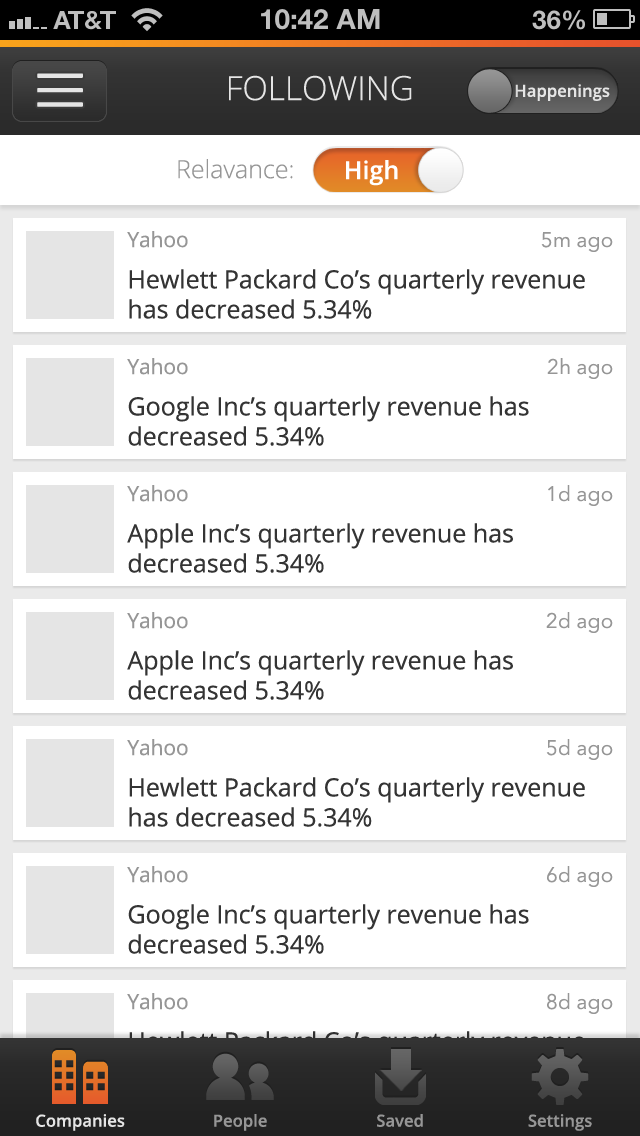
<style>
.page{position:relative;width:640px;height:1136px;background:#ffffff}
.page>*{position:absolute;margin:0}
.t1{font:33.3px "OpenSans-Light";color:#e5e5e5}
.t2{font:16.7px "OpenSans-Semibold";color:#e5e5e5}
.t3{font:25px "OpenSans-Light";color:#969696}
.t4{font:25px "OpenSans-Semibold";color:#ffffff}
.t5{font:25px "OpenSans";color:#343434}
.t6{font:20.8px "OpenSans";color:#969696}
.t7{font:20.8px "AvenirNext-Regular";color:#969696}
.t8{font:16.7px "OpenSans-Semibold";color:#969696}
</style>
<div class="page">
<p class="t1" style="left:229px;top:75px;width:183px;height:26px">FOLLOWING</p>
<p class="t2" style="left:515px;top:84px;width:95px;height:17px">Happenings</p>
<p class="t3" style="left:178px;top:159px;width:115px;height:20px">Relavance:</p>
<p class="t4" style="left:346px;top:160px;width:52px;height:26px">High</p>
<p class="t5" style="left:127px;top:231px;width:458px;height:88px"><span class="t6">Yahoo<br></span>Hewlett Packard Co’s quarterly revenue has decreased 5.34%</p>
<p class="t7" style="left:541px;top:232px;width:72px;height:20px">5m ago</p>
<p class="t5" style="left:127px;top:358px;width:402px;height:88px"><span class="t6">Yahoo<br></span>Google Inc’s quarterly revenue has decreased 5.34%</p>
<p class="t7" style="left:547px;top:358px;width:66px;height:21px">2h ago</p>
<p class="t5" style="left:127px;top:485px;width:386px;height:88px"><span class="t6">Yahoo<br></span>Apple Inc’s quarterly revenue has decreased 5.34%</p>
<p class="t7" style="left:548px;top:485px;width:65px;height:21px">1d ago</p>
<p class="t5" style="left:127px;top:612px;width:386px;height:88px"><span class="t6">Yahoo<br></span>Apple Inc’s quarterly revenue has decreased 5.34%</p>
<p class="t7" style="left:546px;top:612px;width:67px;height:21px">2d ago</p>
<p class="t5" style="left:127px;top:739px;width:458px;height:88px"><span class="t6">Yahoo<br></span>Hewlett Packard Co’s quarterly revenue has decreased 5.34%</p>
<p class="t7" style="left:546px;top:739px;width:67px;height:21px">5d ago</p>
<p class="t5" style="left:127px;top:866px;width:402px;height:88px"><span class="t6">Yahoo<br></span>Google Inc’s quarterly revenue has decreased 5.34%</p>
<p class="t7" style="left:547px;top:866px;width:66px;height:21px">6d ago</p>
<p class="t7" style="left:547px;top:993px;width:66px;height:21px">8d ago</p>
<p class="t2" style="left:36px;top:1114px;width:89px;height:17px">Companies</p>
<p class="t8" style="left:214px;top:1114px;width:53px;height:17px">People</p>
<p class="t8" style="left:377px;top:1114px;width:46px;height:13px">Saved</p>
<p class="t8" style="left:528px;top:1114px;width:64px;height:17px">Settings</p>
</div>
